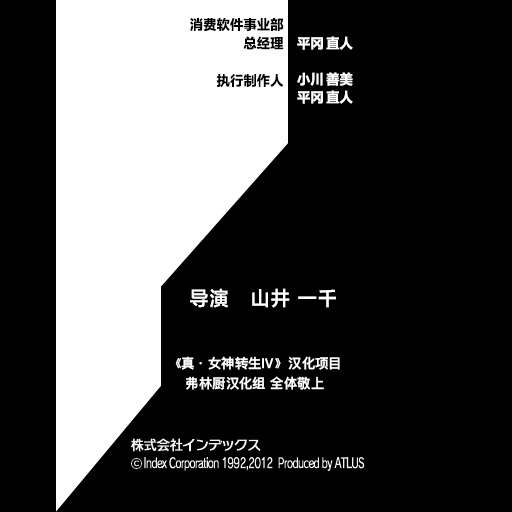
<style>
.page{position:relative;width:512px;height:512px;background:#000000}
.page>*{position:absolute;margin:0}
.t1{font:13.5px/18.7px "FZLTHProGlobal-Bold";letter-spacing:0.005em;color:#000000}
.t2{font:13.5px/18px "FZLTHProGlobal-Bold";letter-spacing:0.005em;color:#ffffff}
.t3{font:13.5px/18.7px "FZLTHProGlobal-Bold";letter-spacing:0.005em;color:#ffffff}
.t4{font:20.2px "FZLTHProGlobal-Demibold";letter-spacing:0.005em;color:#ffffff}
.t5{font:13.5px/20px "DFKingGothicSC14-Semibold";letter-spacing:0.005em;color:#ffffff}
</style>
<div class="page">
<p class="t1" style="left:190px;top:18px;width:94px;height:69px;text-align:right">消费软件事业部<br>总经理<br><br>执行制作人</p>
<p class="t2" style="left:297px;top:36px;width:56px;height:68px"><span class="t3"><br><br></span>平冈 直人<br><br>小川 善美<br>平冈 直人</p>
<p class="t4" style="left:190px;top:288px;width:146px;height:20px">导演   山井 一千</p>
<p class="t5" style="left:175px;top:356px;width:165px;height:34px;text-align:center">《真·女神转生Ⅳ》汉化项目<br>弗林厨汉化组 全体敬上</p>
</div>
